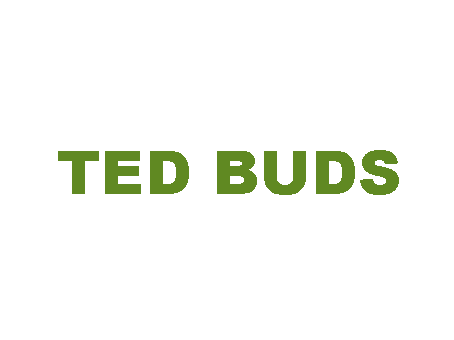
<style>
.page{position:relative;width:454px;height:340px;background:#ffffff}
.page>*{position:absolute;margin:0}
.t1{font:60px "Arial-Black";letter-spacing:0.01em;color:#608922}
</style>
<div class="page">
<p class="t1" style="left:58px;top:150px;width:341px;height:45px">TED BUDS</p>
</div>
